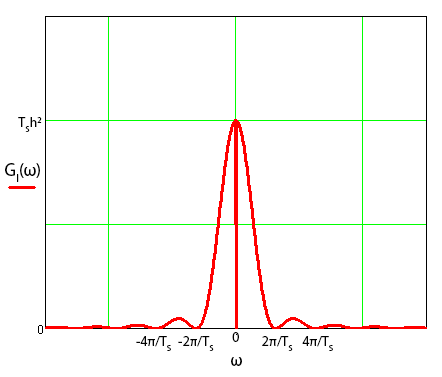
<style>
.page{position:relative;width:442px;height:377px;background:#ffffff}
.page>*{position:absolute;margin:0}
.t1{font:14px "MyriadPro-Regular";color:#000000}
.t2{font:18px "MyriadPro-Regular";color:#000000}
</style>
<div class="page">
<p class="t1" style="left:18px;top:117px;width:24px;height:15px">TSh2</p>
<p class="t2" style="left:5px;top:163px;width:35px;height:19px">GI(ω)</p>
<p class="t1" style="left:136px;top:336px;width:35px;height:15px">-4π/TS</p>
<p class="t1" style="left:178px;top:336px;width:36px;height:15px">-2π/TS</p>
<p class="t1" style="left:232px;top:332px;width:7px;height:10px">0</p>
<p class="t1" style="left:262px;top:336px;width:31px;height:15px">2π/TS</p>
<p class="t1" style="left:302px;top:336px;width:31px;height:15px">4π/TS</p>
<p class="t2" style="left:231px;top:357px;width:11px;height:9px">ω</p>
</div>
